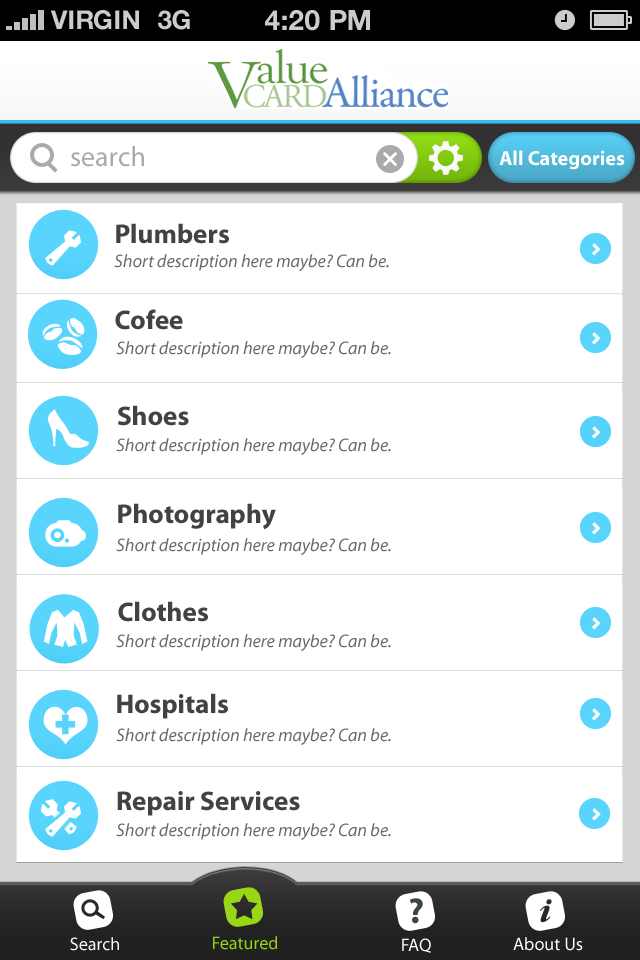
<style>
.page{position:relative;width:640px;height:960px;background:#ffffff}
.page>*{position:absolute;margin:0}
.t1{font:26px "HelveticaNeue-Bold";color:#cccccc;text-transform:uppercase}
.t2{font:28px "HelveticaNeue-Bold";color:#cccccc;text-transform:uppercase}
.t3{font:28px "MyriadPro-Regular";color:#aaaaaa}
.t4{font:20.4px "MyriadPro-Bold";color:#ffffff}
.t5{font:27.2px "MyriadPro-Bold";color:#424242}
.t6{font:18.1px "MyriadPro-It";color:#686868}
.t7{font:36px "MyriadPro-Bold";color:#3d4548}
.t8{font:18.1px "MyriadPro-Regular";color:#ffffff}
.t9{font:18.1px "MyriadPro-Regular";color:#99d615}
</style>
<div class="page">
<p class="t1" style="left:50px;top:10px;width:89px;height:20px">VIRGIN</p>
<p class="t1" style="left:158px;top:10px;width:32px;height:20px">3G</p>
<p class="t2" style="left:265px;top:10px;width:105px;height:21px">4:20 pM</p>
<p class="t3" style="left:71px;top:146px;width:73px;height:21px">search</p>
<p class="t4" style="left:499px;top:150px;width:126px;height:20px">All Categories</p>
<p class="t5" style="left:116px;top:223px;width:113px;height:21px">Plumbers</p>
<p class="t6" style="left:114px;top:254px;width:275px;height:17px">Short description here maybe? Can be.</p>
<p class="t5" style="left:115px;top:309px;width:68px;height:21px">Cofee</p>
<p class="t6" style="left:116px;top:341px;width:275px;height:17px">Short description here maybe? Can be.</p>
<p class="t5" style="left:118px;top:405px;width:71px;height:21px">Shoes</p>
<p class="t6" style="left:116px;top:438px;width:275px;height:17px">Short description here maybe? Can be.</p>
<p class="t5" style="left:118px;top:503px;width:158px;height:26px">Photography</p>
<p class="t6" style="left:116px;top:538px;width:275px;height:17px">Short description here maybe? Can be.</p>
<p class="t5" style="left:118px;top:601px;width:90px;height:21px">Clothes</p>
<p class="t6" style="left:116px;top:634px;width:275px;height:17px">Short description here maybe? Can be.</p>
<p class="t5" style="left:117px;top:693px;width:111px;height:26px">Hospitals</p>
<p class="t6" style="left:116px;top:728px;width:275px;height:17px">Short description here maybe? Can be.</p>
<p class="t5" style="left:117px;top:791px;width:183px;height:25px">Repair Services</p>
<p class="t6" style="left:116px;top:823px;width:275px;height:17px">Short description here maybe? Can be.</p>
<p class="t7" style="left:409px;top:898px;width:14px;height:26px">?</p>
<p class="t8" style="left:70px;top:937px;width:49px;height:14px">Search</p>
<p class="t9" style="left:213px;top:936px;width:64px;height:14px">Featured</p>
<p class="t8" style="left:402px;top:938px;width:29px;height:15px">FAQ</p>
<p class="t8" style="left:513px;top:937px;width:70px;height:14px">About Us</p>
</div>
